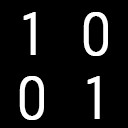
<style>
.page{position:relative;width:128px;height:128px;background:#000000}
.page>*{position:absolute;margin:0}
.t1{font:108.1px "ARBONNIE";color:#ffffff;font-weight:bold}
.t2{font:107.5px "ARBONNIE";color:#ffffff;font-weight:bold}
</style>
<div class="page">
<p class="t1" style="left:23px;top:12px;width:13px;height:43px">1</p>
<p class="t1" style="left:83px;top:12px;width:25px;height:44px">0</p>
<p class="t2" style="left:19px;top:76px;width:25px;height:44px">0</p>
<p class="t2" style="left:87px;top:76px;width:13px;height:43px">1</p>
</div>
